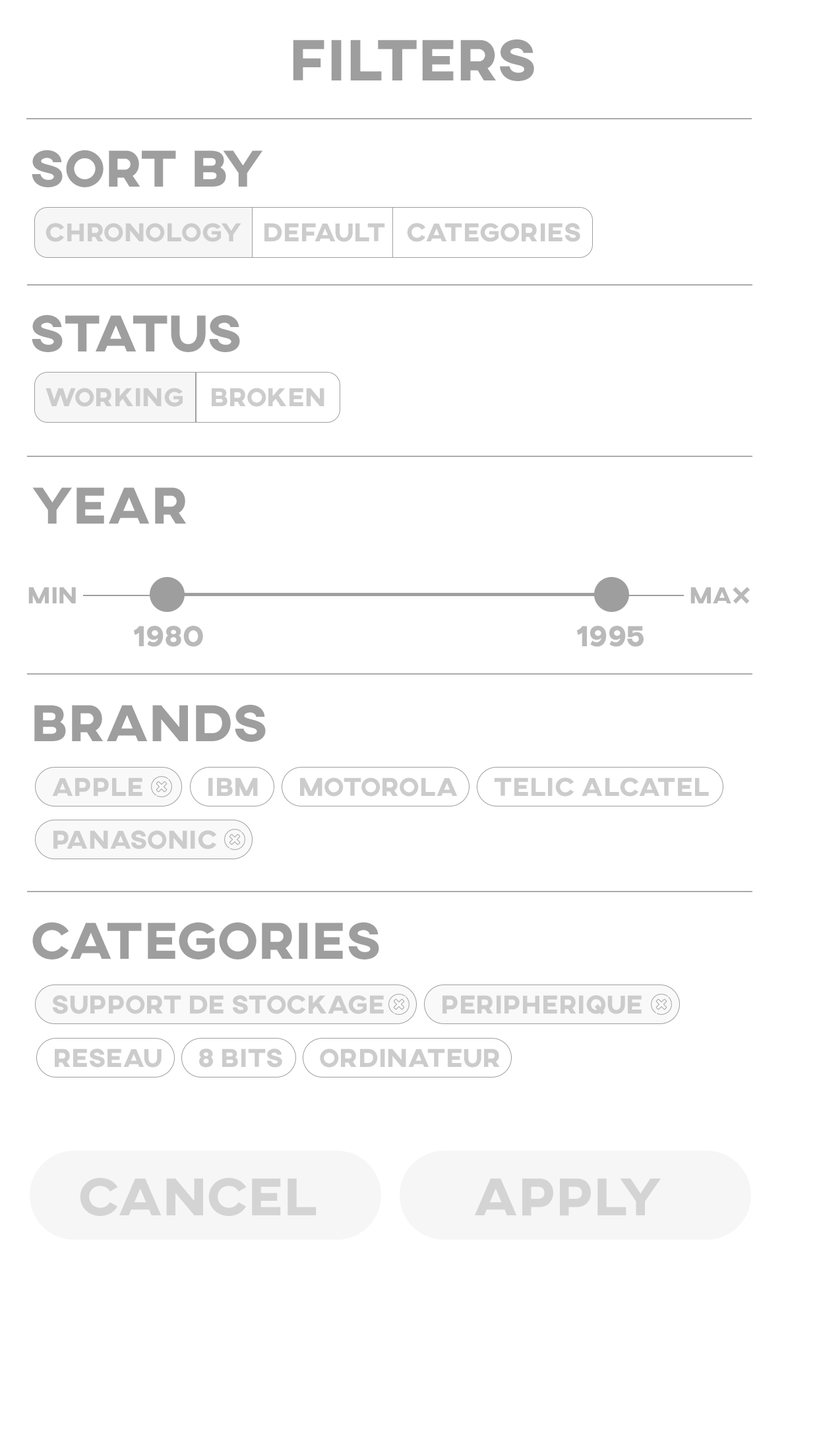
<style>
.page{position:relative;width:819px;height:1456px;background:#ffffff}
.page>*{position:absolute;margin:0}
.t1{font:59.3px "AXIS-ExtraBold";color:#9e9e9e}
.t2{font:52.8px "AXIS-ExtraBold";color:#9e9e9e}
.t3{font:26.4px "AXIS-ExtraBold";color:#cccccc}
.t4{font:23.7px "AXIS-ExtraBold";color:#b9b9b9}
.t5{font:29.6px "AXIS-ExtraBold";color:#b9b9b9}
.t6{font:54.1px "AXIS-ExtraBold";color:#d4d4d4}
</style>
<div class="page">
<p class="t1" style="left:293px;top:39px;width:241px;height:42px">FILTERS</p>
<p class="t2" style="left:32px;top:150px;width:230px;height:37px">SORT BY</p>
<p class="t3" style="left:45px;top:223px;width:196px;height:19px">chronology</p>
<p class="t3" style="left:264px;top:223px;width:121px;height:19px">DEFAULT</p>
<p class="t3" style="left:407px;top:223px;width:173px;height:19px">CATEGORIES</p>
<p class="t2" style="left:32px;top:315px;width:208px;height:37px">STATUS</p>
<p class="t3" style="left:45px;top:388px;width:138px;height:19px">WORKING</p>
<p class="t3" style="left:212px;top:388px;width:112px;height:19px">BROKEN</p>
<p class="t2" style="left:32px;top:487px;width:155px;height:37px">YEAR</p>
<p class="t4" style="left:28px;top:587px;width:48px;height:16px">MIN</p>
<p class="t4" style="left:690px;top:587px;width:60px;height:17px">MAX</p>
<p class="t5" style="left:134px;top:626px;width:69px;height:21px">1980</p>
<p class="t5" style="left:577px;top:626px;width:67px;height:21px">1995</p>
<p class="t2" style="left:34px;top:704px;width:232px;height:38px">BRANDS</p>
<p class="t3" style="left:52px;top:777px;width:90px;height:19px">APPLE</p>
<p class="t3" style="left:208px;top:777px;width:50px;height:19px">IBM</p>
<p class="t3" style="left:300px;top:777px;width:158px;height:20px">MOTOROLA</p>
<p class="t3" style="left:494px;top:777px;width:215px;height:20px">TELIC ALCATEL</p>
<p class="t3" style="left:53px;top:830px;width:163px;height:19px">PANASONIC</p>
<p class="t2" style="left:32px;top:922px;width:347px;height:37px">CATEGORIES</p>
<p class="t3" style="left:52px;top:995px;width:332px;height:19px">SUPPORT DE STOCKAGE</p>
<p class="t3" style="left:442px;top:995px;width:200px;height:20px">PERIPHERIQUE</p>
<p class="t3" style="left:55px;top:1048px;width:107px;height:20px">RESEAU</p>
<p class="t3" style="left:199px;top:1048px;width:83px;height:20px">8 BITS</p>
<p class="t3" style="left:320px;top:1048px;width:180px;height:20px">ORDINATEUR</p>
<p class="t6" style="left:80px;top:1178px;width:237px;height:38px">CANCEL</p>
<p class="t6" style="left:475px;top:1178px;width:186px;height:38px">APPLY</p>
</div>
